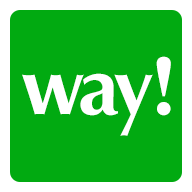
<style>
.page{position:relative;width:192px;height:192px;background:#01aa11}
.page>*{position:absolute;margin:0}
.t1{font:82px "Optima-Bold";letter-spacing:-0.05em;color:#ffffff}
</style>
<div class="page">
<p class="t1" style="left:22px;top:56px;width:149px;height:80px">way!</p>
</div>
